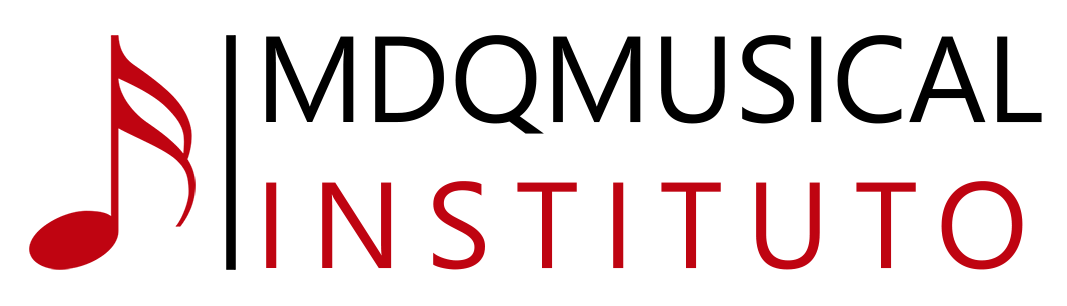
<style>
.page{position:relative;width:1067px;height:306px;background:#ffffff}
.page>*{position:absolute;margin:0}
.t1{font:121.9px "NirmalaUI";color:#000000}
.t2{font:121.9px "NirmalaUI";letter-spacing:0.195em;color:#bf0411}
</style>
<div class="page">
<p class="t1" style="left:266px;top:35px;width:776px;height:235px">MDQMUSICAL<br><span class="t2">INSTITUTO</span></p>
</div>
